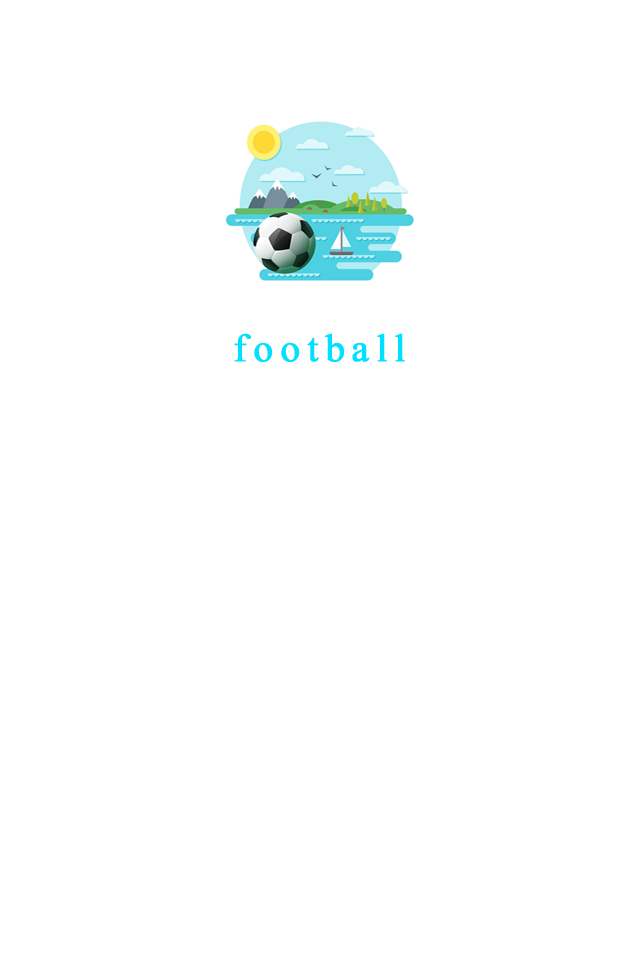
<style>
.page{position:relative;width:640px;height:960px;background:#ffffff}
.page>*{position:absolute;margin:0}
.t1{font:39.3px "MongolianBaiti";letter-spacing:0.16em;color:#00e0ff;font-weight:bold}
</style>
<div class="page">
<p class="t1" style="left:234px;top:333px;width:171px;height:29px">football</p>
</div>
